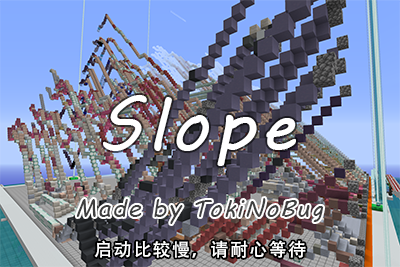
<style>
.page{position:relative;width:400px;height:267px}
.page>*{position:absolute;margin:0}
.t1{font:72px "MVBoli";letter-spacing:0.075em;color:#ffffff}
.t2{font:18px "AdobeHeitiStd-Regular";letter-spacing:0.075em;color:#ffffff}
</style>
<div class="page">
<p class="t1" style="left:103px;top:95px;width:193px;height:71px">Slope</p>
<p class="t2" style="left:94px;top:240px;width:212px;height:18px">启动比较慢，请耐心等待</p>
</div>
